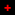
<style>
.page{position:relative;width:15px;height:15px;background:#000000}
.page>*{position:absolute;margin:0}
.t1{font:11px "MaturaMTScriptCapitals";color:#ff0000}
</style>
<div class="page">
<p class="t1" style="left:4px;top:4px;width:7px;height:7px">+</p>
</div>
